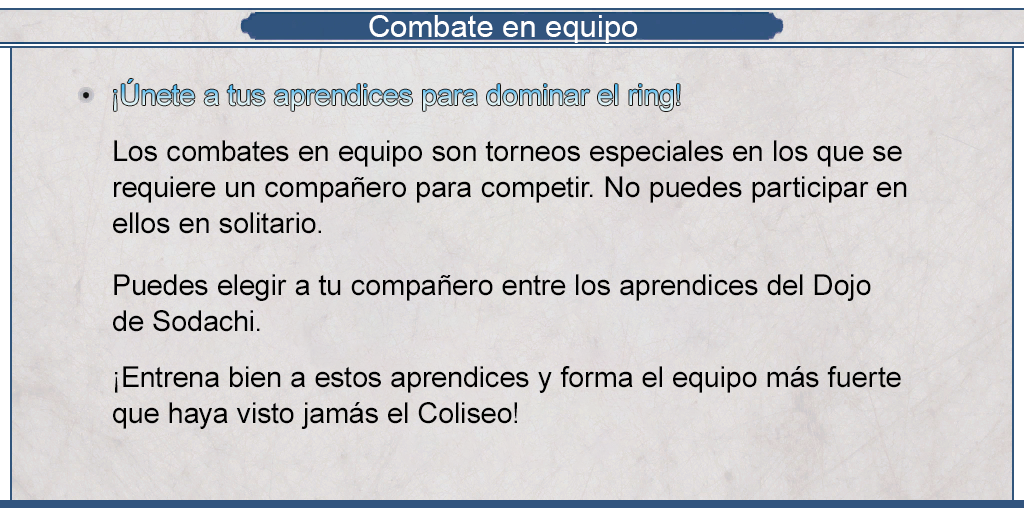
<style>
.page{position:relative;width:1024px;height:512px}
.page>*{position:absolute;margin:0}
.t1{font:30.8px "ArialMT";color:#ffffff}
.t2{font:29px/36px "ArialMT";color:#000000}
</style>
<div class="page">
<p class="t1" style="left:369px;top:15px;width:269px;height:28px">Combate en equipo</p>
<p class="t2" style="left:113px;top:140px;width:794px;height:94px">Los combates en equipo son torneos especiales en los que se <br>requiere un compañero para competir. No puedes participar en <br>ellos en solitario.</p>
<p class="t2" style="left:113px;top:274px;width:758px;height:58px">Puedes elegir a tu compañero entre los aprendices del Dojo <br>de Sodachi.</p>
<p class="t2" style="left:113px;top:366px;width:788px;height:63px">¡Entrena bien a estos aprendices y forma el equipo más fuerte <br>que haya visto jamás el Coliseo!</p>
</div>
